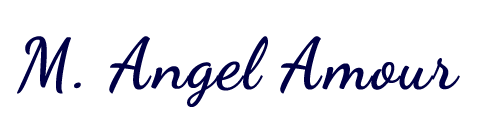
<style>
.page{position:relative;width:477px;height:128px;background:#ffffff}
.page>*{position:absolute;margin:0}
.t1{font:70px "DancingScript-Regular";color:#000046;font-weight:bold}
</style>
<div class="page">
<p class="t1" style="left:17px;top:36px;width:443px;height:71px">M. Angel Amour</p>
</div>
